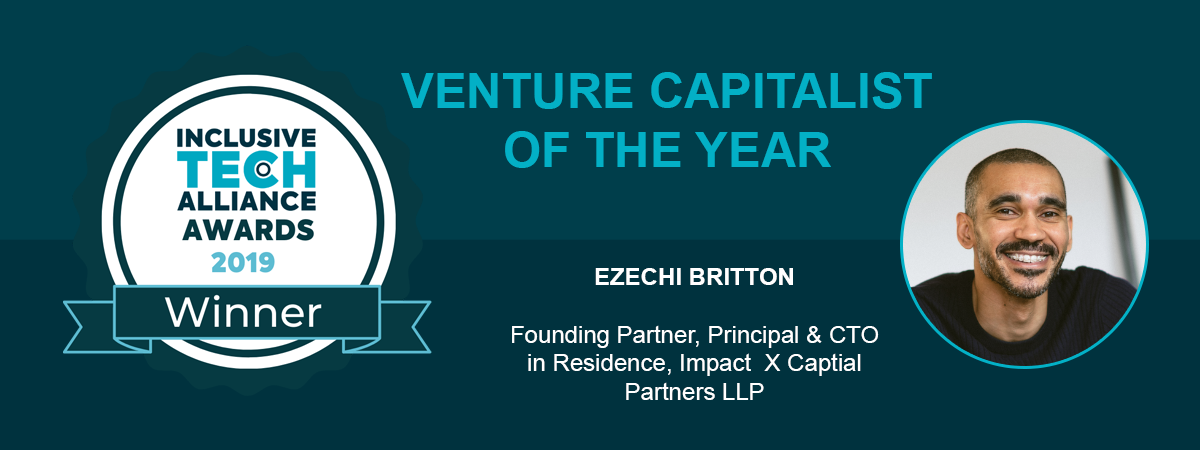
<style>
.page{position:relative;width:1200px;height:450px;background:#003e4b}
.page>*{position:absolute;margin:0}
.t1{font:49px "Arial-BoldMT";color:#03b0c6}
.t2{font:24px "ArialMT";color:#ffffff}
.t3{font:24px "Arial-BoldMT";color:#ffffff}
</style>
<div class="page">
<p class="t1" style="left:401px;top:72px;width:531px;height:96px;text-align:center">VENTURE CAPITALIST OF THE YEAR</p>
<p class="t2" style="left:512px;top:268px;width:367px;height:132px;text-align:center"><span class="t3">EZECHI BRITTON<br><br></span>Founding Partner, Principal &amp; CTO in Residence, Impact  X Captial Partners LLP</p>
</div>
